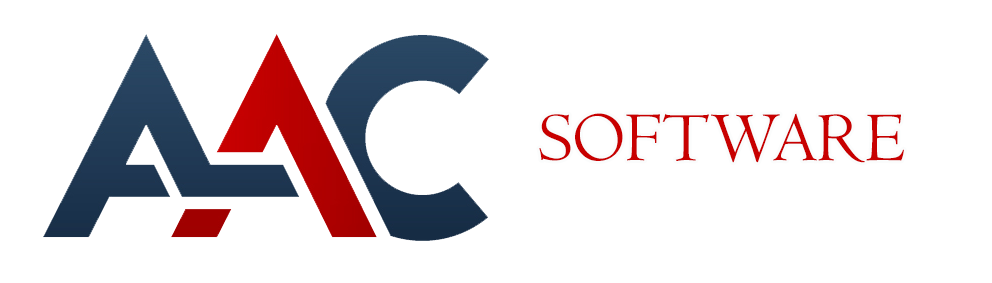
<style>
.page{position:relative;width:992px;height:283px;background:#ffffff}
.page>*{position:absolute;margin:0}
.t1{font:72px "Centaur";color:#c80000}
</style>
<div class="page">
<p class="t1" style="left:539px;top:113px;width:365px;height:50px">SOFTWARE</p>
</div>
